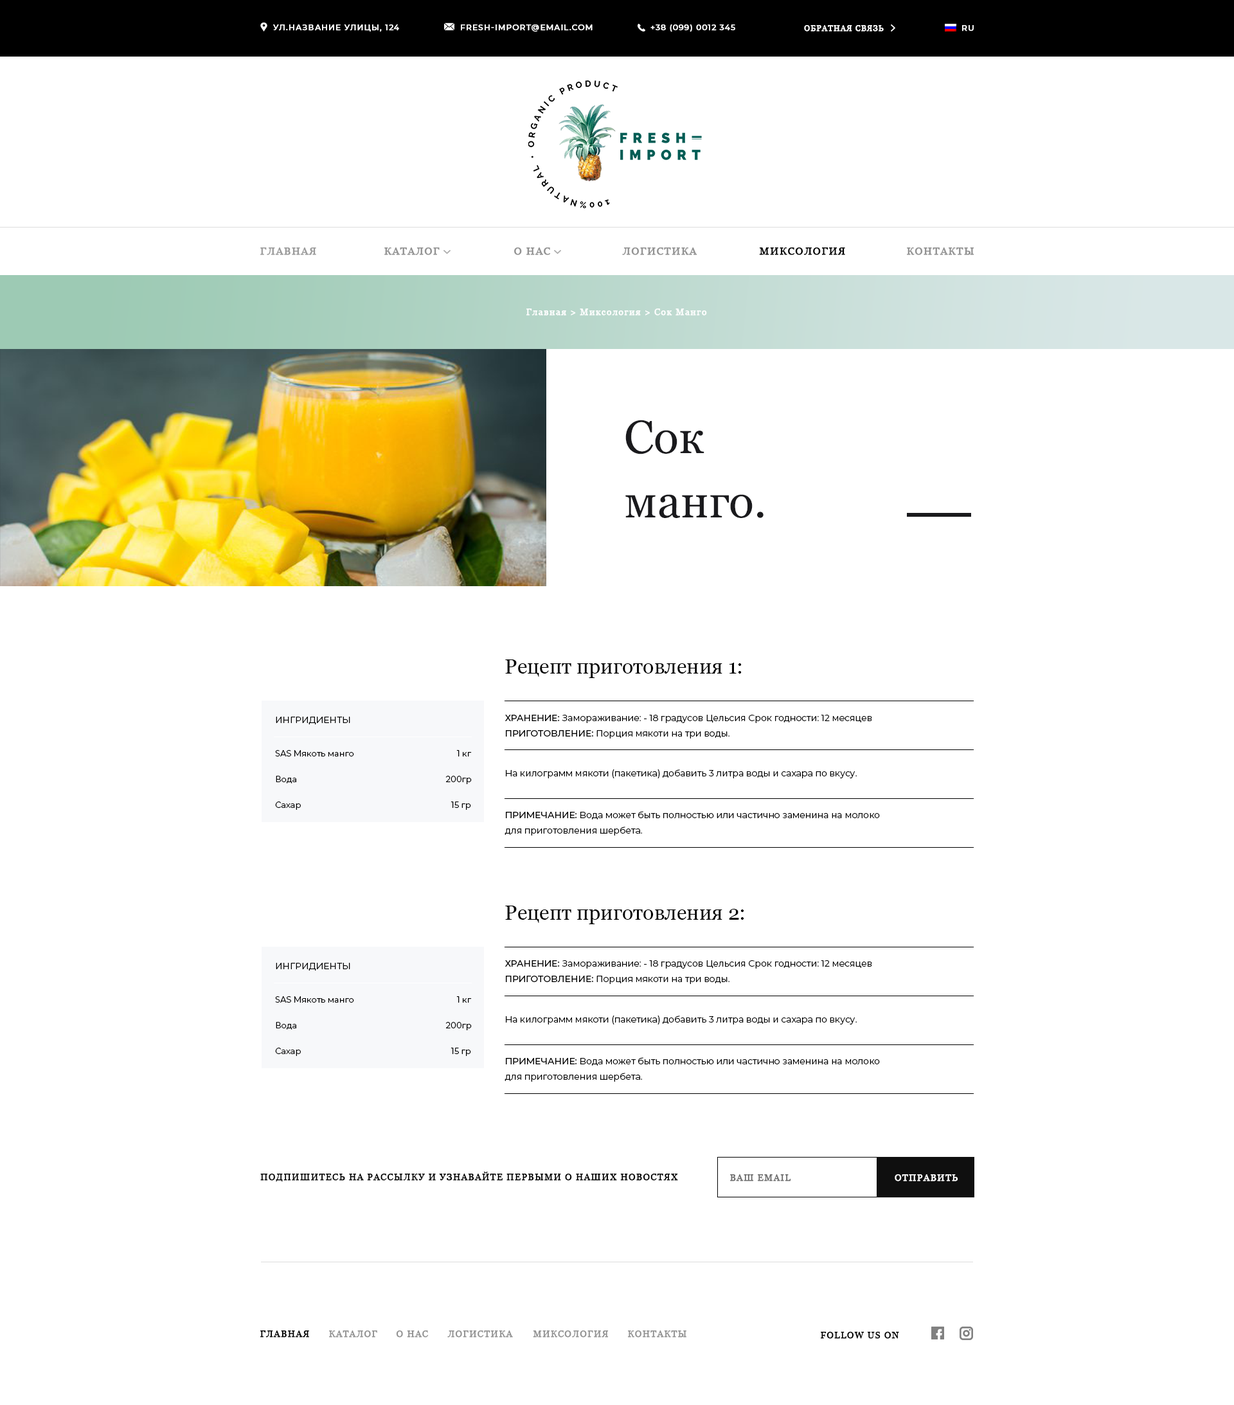
<style>
.page{position:relative;width:1234px;height:1405px;background:#ffffff}
.page>*{position:absolute;margin:0}
.t1{font:7.7px "Montserrat-Medium";letter-spacing:0.075em;color:#ffffff;text-transform:uppercase;font-weight:bold}
.t2{font:7.7px "Montserrat-Medium";letter-spacing:0.075em;color:#ffffff;font-weight:bold}
.t3{font:7.7px "Georgia";letter-spacing:0.075em;color:#ffffff;text-transform:uppercase;font-weight:bold}
.t4{font:10.3px "Georgia";letter-spacing:0.075em;color:#9b9b9b;text-transform:uppercase;font-weight:bold}
.t5{font:10.3px "Georgia";letter-spacing:0.075em;color:#929292;text-transform:uppercase;font-weight:bold}
.t6{font:10.3px "Georgia";letter-spacing:0.075em;color:#000000;text-transform:uppercase;font-weight:bold}
.t7{font:9px "Georgia";letter-spacing:0.075em;color:#ffffff;font-weight:bold}
.t8{font:46.3px/64.3px "Georgia";color:#1a1a1d}
.t9{font:20.6px "Georgia";color:#000000}
.t10{font:9px "Montserrat-Regular";color:#000000;text-transform:uppercase}
.t11{font:9px/15.4px "Montserrat-Regular";color:#000000}
.t12{font:9px/15.4px "Montserrat-Medium";color:#000000;text-transform:uppercase}
.t13{font:8.4px "Montserrat-Regular";color:#000000}
.t14{font:8.4px "Montserrat-Regular";color:#010101}
.t15{font:9px "Montserrat-Regular";color:#000000}
.t16{font:9px "Georgia";letter-spacing:0.075em;color:#000000;text-transform:uppercase;font-weight:bold}
.t17{font:9px "Georgia";letter-spacing:0.075em;color:#6e6e6e;text-transform:uppercase;font-weight:bold}
.t18{font:9px "Georgia";letter-spacing:0.075em;color:#ffffff;text-transform:uppercase;font-weight:bold}
.t19{font:9px "Georgia";letter-spacing:0.075em;color:#929292;text-transform:uppercase;font-weight:bold}
</style>
<div class="page">
<p class="t1" style="left:273px;top:24px;width:126px;height:8px"><span class="t2">УЛ.</span>название улицы<span class="t2">, 124</span></p>
<p class="t1" style="left:461px;top:24px;width:132px;height:8px">FRESH-IMPORT@EMAIL.COM</p>
<p class="t2" style="left:651px;top:24px;width:84px;height:8px">+38 (099) 0012 345</p>
<p class="t3" style="left:804px;top:25px;width:80px;height:7px">обратная связь</p>
<p class="t1" style="left:962px;top:25px;width:12px;height:7px">Ru</p>
<p class="t4" style="left:260px;top:248px;width:56px;height:7px">гЛАВНАЯ</p>
<p class="t5" style="left:384px;top:248px;width:56px;height:7px">КАТАЛОГ</p>
<p class="t5" style="left:514px;top:248px;width:37px;height:7px">О НАС</p>
<p class="t5" style="left:622px;top:248px;width:76px;height:7px">логистика</p>
<p class="t6" style="left:759px;top:248px;width:86px;height:7px">миксология</p>
<p class="t5" style="left:907px;top:248px;width:68px;height:7px">контакты</p>
<p class="t7" style="left:526px;top:309px;width:181px;height:7px">Главная &gt; Миксология &gt; Сок Манго</p>
<p class="t8" style="left:626px;top:420px;width:138px;height:98px">Сок<br>манго.</p>
<p class="t9" style="left:505px;top:660px;width:237px;height:18px">Рецепт приготовления 1:</p>
<p class="t10" style="left:276px;top:717px;width:74px;height:8px">Ингридиенты</p>
<p class="t11" style="left:505px;top:715px;width:367px;height:24px"><span class="t12">Хранение: </span>Замораживание: - 18 градусов Цельсия Срок годности: 12 месяцев<br><span class="t12">Приготовление: </span>Порция мякоти на три воды.</p>
<p class="t13" style="left:275px;top:750px;width:79px;height:7px">SAS Мякоть манго</p>
<p class="t14" style="left:456px;top:750px;width:16px;height:7px">1 кг</p>
<p class="t15" style="left:506px;top:770px;width:351px;height:9px">На килограмм мякоти (пакетика) добавить 3 литра воды и сахара по вкусу.</p>
<p class="t13" style="left:276px;top:776px;width:20px;height:8px">Вода</p>
<p class="t13" style="left:446px;top:776px;width:26px;height:8px">200гр</p>
<p class="t13" style="left:275px;top:802px;width:26px;height:8px">Сахар</p>
<p class="t13" style="left:451px;top:802px;width:20px;height:8px">15 гр</p>
<p class="t11" style="left:505px;top:811px;width:375px;height:25px"><span class="t12">Примечание:</span> Вода может быть полностью или частично заменина на молоко <br>для приготовления шербета.</p>
<p class="t9" style="left:505px;top:906px;width:239px;height:18px">Рецепт приготовления 2:</p>
<p class="t10" style="left:276px;top:963px;width:74px;height:8px">Ингридиенты</p>
<p class="t11" style="left:505px;top:960px;width:367px;height:24px"><span class="t12">Хранение: </span>Замораживание: - 18 градусов Цельсия Срок годности: 12 месяцев<br><span class="t12">Приготовление: </span>Порция мякоти на три воды.</p>
<p class="t13" style="left:275px;top:996px;width:79px;height:7px">SAS Мякоть манго</p>
<p class="t14" style="left:456px;top:996px;width:16px;height:7px">1 кг</p>
<p class="t13" style="left:276px;top:1022px;width:20px;height:8px">Вода</p>
<p class="t13" style="left:446px;top:1022px;width:26px;height:8px">200гр</p>
<p class="t15" style="left:506px;top:1016px;width:351px;height:9px">На килограмм мякоти (пакетика) добавить 3 литра воды и сахара по вкусу.</p>
<p class="t13" style="left:275px;top:1048px;width:26px;height:8px">Сахар</p>
<p class="t13" style="left:451px;top:1048px;width:20px;height:8px">15 гр</p>
<p class="t11" style="left:505px;top:1058px;width:375px;height:24px"><span class="t12">Примечание:</span> Вода может быть полностью или частично заменина на молоко <br>для приготовления шербета.</p>
<p class="t16" style="left:260px;top:1172px;width:418px;height:10px">ПОДПИШИТЕСЬ НА РАССЫЛКУ И УЗНАВАЙТЕ ПЕРВЫМИ О НАШИХ НОВОСТЯХ</p>
<p class="t17" style="left:730px;top:1174px;width:61px;height:8px">ВАШ email</p>
<p class="t18" style="left:895px;top:1174px;width:64px;height:8px">ОТПРАВИТЬ</p>
<p class="t16" style="left:260px;top:1331px;width:49px;height:7px">гЛАВНАЯ</p>
<p class="t19" style="left:329px;top:1331px;width:48px;height:7px">КАТАЛОГ</p>
<p class="t19" style="left:396px;top:1331px;width:33px;height:7px">О НАС</p>
<p class="t19" style="left:447px;top:1331px;width:66px;height:7px">логистика</p>
<p class="t19" style="left:533px;top:1331px;width:76px;height:7px">миксология</p>
<p class="t19" style="left:628px;top:1331px;width:59px;height:7px">контакты</p>
<p class="t16" style="left:821px;top:1332px;width:78px;height:7px">follow us on</p>
</div>
